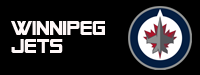
<style>
.page{position:relative;width:200px;height:75px;background:#000000}
.page>*{position:absolute;margin:0}
.t1{font:20px/18px "AlienEncountersSolidBold";color:#fef7f7}
</style>
<div class="page">
<p class="t1" style="left:11px;top:21px;width:94px;height:32px">Winnipeg<br>Jets</p>
</div>
